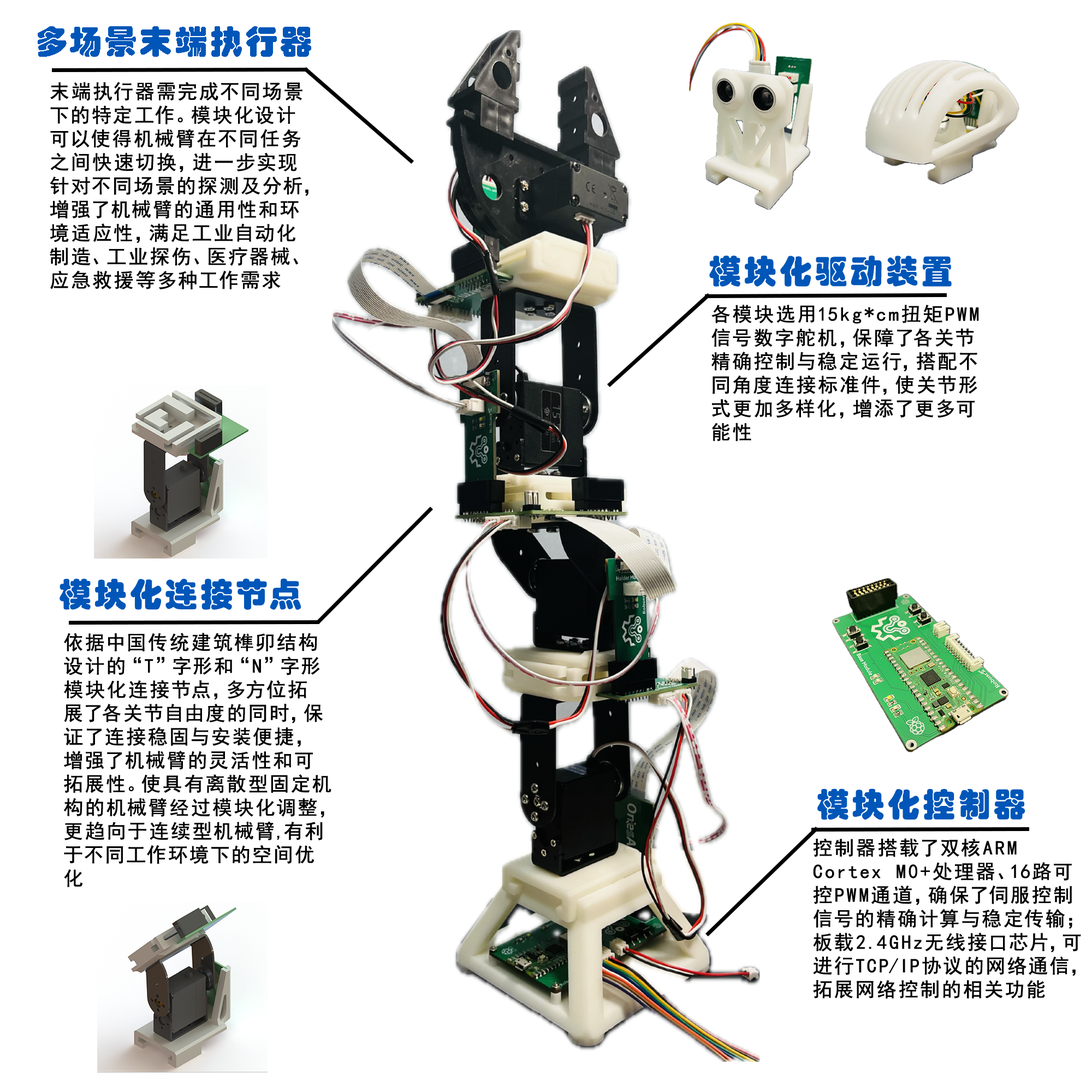
<style>
.page{position:relative;width:1092px;height:1092px;background:#ffffff}
.page>*{position:absolute;margin:0}
.t1{font:32.8px "STHupo";letter-spacing:0.1em;color:#0056b8}
.t2{font:19.7px "SimHei";letter-spacing:0.1em;color:#000000;font-weight:bold}
</style>
<div class="page">
<p class="t1" style="left:38px;top:26px;width:273px;height:31px">多场景末端执行器</p>
<p class="t2" style="left:50px;top:82px;width:258px;height:207px">末端执行器需完成不同场景<br>下的特定工作。模块化设计<br>可以使得机械臂在不同任务<br>之间快速切换，进一步实现<br>针对不同场景的探测及分析，<br>增强了机械臂的通用性和环<br>境适应性，满足工业自动化<br>制造、工业探伤、医疗器械、<br>应急救援等多种工作需求</p>
<p class="t1" style="left:709px;top:256px;width:243px;height:31px">模块化驱动装置</p>
<p class="t2" style="left:711px;top:305px;width:268px;height:136px">各模块选用15kg*cm扭矩PWM<br>信号数字舵机，保障了各关节<br>精确控制与稳定运行，搭配不<br>同角度连接标准件，使关节形<br>式更加多样化，增添了更多可<br>能性</p>
<p class="t1" style="left:60px;top:578px;width:241px;height:32px">模块化连接节点</p>
<p class="t2" style="left:64px;top:633px;width:267px;height:254px">依据中国传统建筑榫卯结构<br>设计的“T”字形和“N”字形<br>模块化连接节点，多方位拓<br>展了各关节自由度的同时，保<br>证了连接稳固与安装便捷，<br>增强了机械臂的灵活性和可<br>拓展性。使具有离散型固定机<br>构的机械臂经过模块化调整，<br>更趋向于连续型机械臂,有利<br>于不同工作环境下的空间优<br>化</p>
<p class="t1" style="left:817px;top:788px;width:208px;height:32px">模块化控制器</p>
<p class="t2" style="left:813px;top:838px;width:268px;height:161px">控制器搭载了双核ARM <br>Cortex M0+处理器、16路可<br>控PWM通道，确保了伺服控制<br>信号的精确计算与稳定传输；<br>板载2.4GHz无线接口芯片，可<br>进行TCP/IP协议的网络通信，<br>拓展网络控制的相关功能</p>
</div>
